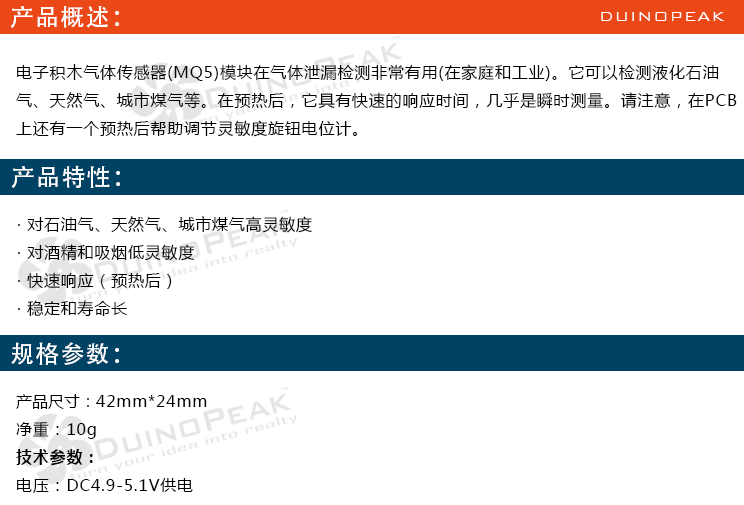
<style>
.page{position:relative;width:744px;height:505px;background:#ffffff}
.page>*{position:absolute;margin:0}
.t1{font:24px "AdobeHeitiStd-Regular";letter-spacing:0.05em;color:#ffffff}
.t2{font:18px "BankGothicBT-Light";letter-spacing:0.05em;color:#ffffff}
.t3{font:16px "MicrosoftYaHei";letter-spacing:0.05em;color:#000000}
.t4{font:16px "MicrosoftYaHei";color:#000000}
.t5{font:16px "MicrosoftYaHei-Bold";letter-spacing:0.05em;color:#000000}
</style>
<div class="page">
<p class="t1" style="left:10px;top:6px;width:109px;height:23px">产品概述：</p>
<p class="t2" style="left:601px;top:12px;width:124px;height:9px">DUINOPEAK</p>
<p class="t3" style="left:16px;top:64px;width:721px;height:73px">电子积木气体传感器(MQ5)模块在气体泄漏检测非常有用(在家庭和工业)。它可以检测液化石油<br>气、天然气、城市煤气等。在预热后，它具有快速的响应时间，几乎是瞬时测量。请注意，在PCB<br>上还有一个预热后帮助调节灵敏度旋钮电位计。</p>
<p class="t1" style="left:11px;top:165px;width:109px;height:24px">产品特性：</p>
<p class="t3" style="left:18px;top:216px;width:294px;height:101px">· 对石油气、天然气、城市煤气高灵敏度<br>· 对酒精和吸烟低灵敏度<br>· 快速响应（预热后）<br>· 稳定和寿命长</p>
<p class="t1" style="left:11px;top:342px;width:108px;height:23px">规格参数：</p>
<p class="t3" style="left:16px;top:394px;width:191px;height:99px"><span class="t4">产品尺寸：</span>42mm*24mm<br>净重：10g<br><span class="t5">技术参数：<br></span>电压：DC4.9-5.1V供电</p>
</div>
